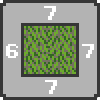
<style>
.page{position:relative;width:100px;height:100px;background:#b3b3b3}
.page>*{position:absolute;margin:0}
.t1{font:16px "SDS_8x8";color:#ffffff}
</style>
<div class="page">
<p class="t1" style="left:44px;top:6px;width:12px;height:14px">7</p>
<p class="t1" style="left:6px;top:44px;width:12px;height:14px">6</p>
<p class="t1" style="left:82px;top:44px;width:12px;height:14px">7</p>
<p class="t1" style="left:45px;top:80px;width:12px;height:14px">7</p>
</div>
